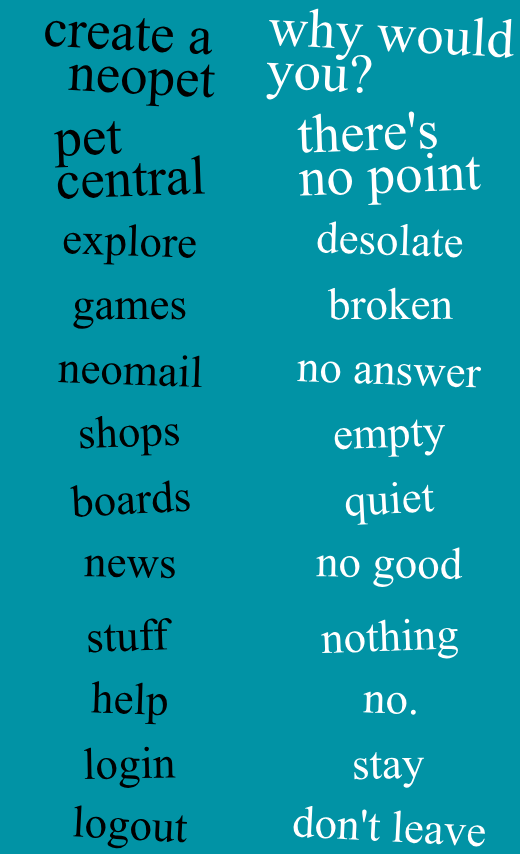
<style>
.page{position:relative;width:520px;height:854px;background:#0193a5}
.page>*{position:absolute;margin:0}
.t1{font:55px "TimesNewRomanPSMT";color:#ffffff}
.t2{font:55px "TimesNewRomanPSMT";color:#000000}
.t3{font:45px "TimesNewRomanPSMT";color:#ffffff}
.t4{font:45px "TimesNewRomanPSMT";color:#000000}
</style>
<div class="page">
<p class="t1" style="left:266px;top:8px;width:248px;height:92px;rotate:3deg">why would<br>you?</p>
<p class="t2" style="left:44px;top:18px;width:171px;height:89px;rotate:3deg">create a <br> neopet</p>
<p class="t1" style="left:297px;top:111px;width:185px;height:94px;rotate:-2deg">there's<br>no point</p>
<p class="t2" style="left:54px;top:120px;width:151px;height:80px;rotate:-2deg">pet<br>central</p>
<p class="t3" style="left:317px;top:221px;width:146px;height:37px;rotate:2deg">desolate</p>
<p class="t4" style="left:63px;top:224px;width:133px;height:41px;rotate:2deg">explore</p>
<p class="t3" style="left:327px;top:287px;width:126px;height:33px">broken</p>
<p class="t4" style="left:73px;top:298px;width:113px;height:31px">games</p>
<p class="t4" style="left:58px;top:355px;width:144px;height:33px;rotate:2deg">neomail</p>
<p class="t3" style="left:297px;top:360px;width:185px;height:28px;rotate:2deg">no answer</p>
<p class="t4" style="left:79px;top:416px;width:101px;height:40px;rotate:-2deg">shops</p>
<p class="t3" style="left:334px;top:419px;width:111px;height:38px;rotate:-2deg">empty</p>
<p class="t4" style="left:70px;top:480px;width:120px;height:37px;rotate:-3deg">boards</p>
<p class="t3" style="left:345px;top:481px;width:90px;height:44px;rotate:-3deg">quiet</p>
<p class="t4" style="left:84px;top:555px;width:91px;height:24px;rotate:1deg">news</p>
<p class="t3" style="left:316px;top:547px;width:147px;height:41px;rotate:1deg">no good</p>
<p class="t4" style="left:88px;top:618px;width:84px;height:35px;rotate:-2deg">stuff</p>
<p class="t3" style="left:321px;top:618px;width:138px;height:41px;rotate:-2deg">nothing</p>
<p class="t4" style="left:91px;top:681px;width:77px;height:44px;rotate:2deg">help</p>
<p class="t3" style="left:363px;top:691px;width:53px;height:24px;rotate:2deg">no.</p>
<p class="t4" style="left:84px;top:746px;width:92px;height:43px;rotate:-1deg">login</p>
<p class="t3" style="left:354px;top:751px;width:71px;height:37px;rotate:-1deg">stay</p>
<p class="t4" style="left:73px;top:805px;width:114px;height:44px;rotate:3deg">logout</p>
<p class="t3" style="left:293px;top:805px;width:193px;height:42px;rotate:3deg">don't leave</p>
</div>
